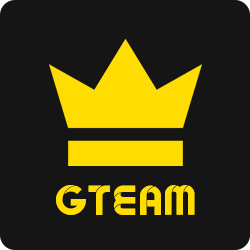
<style>
.page{position:relative;width:250px;height:250px;background:#151515}
.page>*{position:absolute;margin:0}
.t1{font:42.4px "Bauman-Regular";color:#ffdd03}
</style>
<div class="page">
<p class="t1" style="left:56px;top:185px;width:139px;height:30px">GTEAM</p>
</div>
